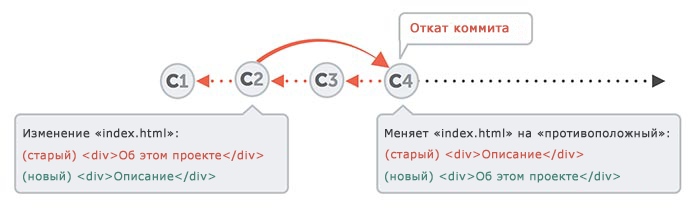
<style>
.page{position:relative;width:696px;height:210px;background:#ffffff}
.page>*{position:absolute;margin:0}
.t1{font:12px "Verdana";letter-spacing:0.025em;color:#ce5648;font-weight:bold}
.t2{font:11px "Verdana";letter-spacing:0.025em;color:#3c3d41;font-weight:bold}
.t3{font:11px "Verdana";letter-spacing:0.025em;color:#ce5648;font-weight:bold}
.t4{font:11px "Verdana";letter-spacing:0.025em;color:#468479;font-weight:bold}
</style>
<div class="page">
<p class="t1" style="left:410px;top:23px;width:99px;height:10px">Откат коммита</p>
<p class="t2" style="left:23px;top:128px;width:155px;height:10px">Изменение «index.html»:</p>
<p class="t2" style="left:385px;top:128px;width:284px;height:12px">Меняет «index.html» на «противоположный»:</p>
<p class="t3" style="left:23px;top:150px;width:241px;height:12px">(старый) &lt;div&gt;Об этом проекте&lt;/div&gt;</p>
<p class="t3" style="left:385px;top:149px;width:199px;height:12px">(старый) &lt;div&gt;Описание&lt;/div&gt;</p>
<p class="t4" style="left:23px;top:171px;width:193px;height:12px">(новый) &lt;div&gt;Описание&lt;/div&gt;</p>
<p class="t4" style="left:385px;top:171px;width:235px;height:12px">(новый) &lt;div&gt;Об этом проекте&lt;/div&gt;</p>
</div>
